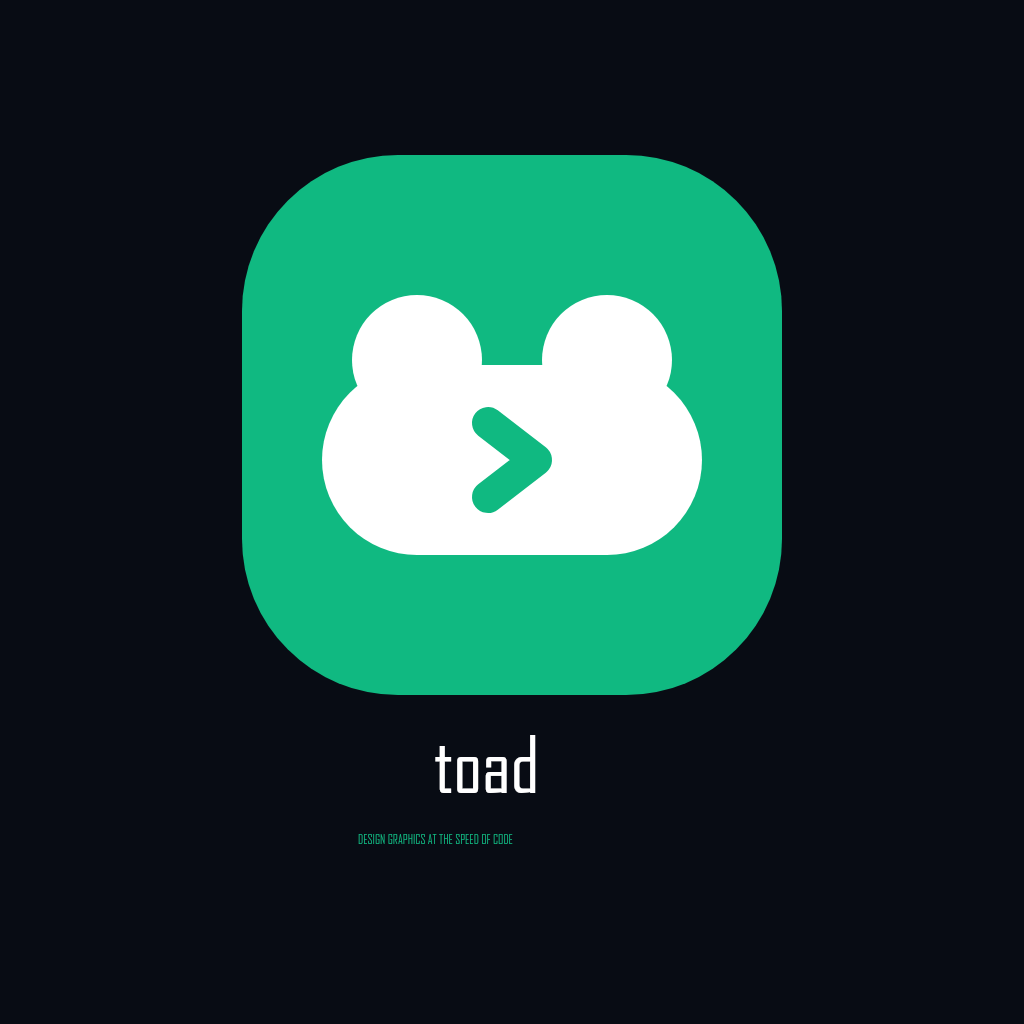
<style>
.page{position:relative;width:1024px;height:1024px;background:#080c14}
.page>*{position:absolute;margin:0}
.t1{font:76px "SegoeUI-Bold";letter-spacing:-0.033em;color:#ffffff}
.t2{font:12px "Consolas-Bold";letter-spacing:0.167em;color:#10b981}
</style>
<div class="page">
<p class="t1" style="left:434px;top:731px;width:156px;height:95px">toad</p>
<p class="t2" style="left:358px;top:834px;width:308px;height:15px">DESIGN GRAPHICS AT THE SPEED OF CODE</p>
</div>
